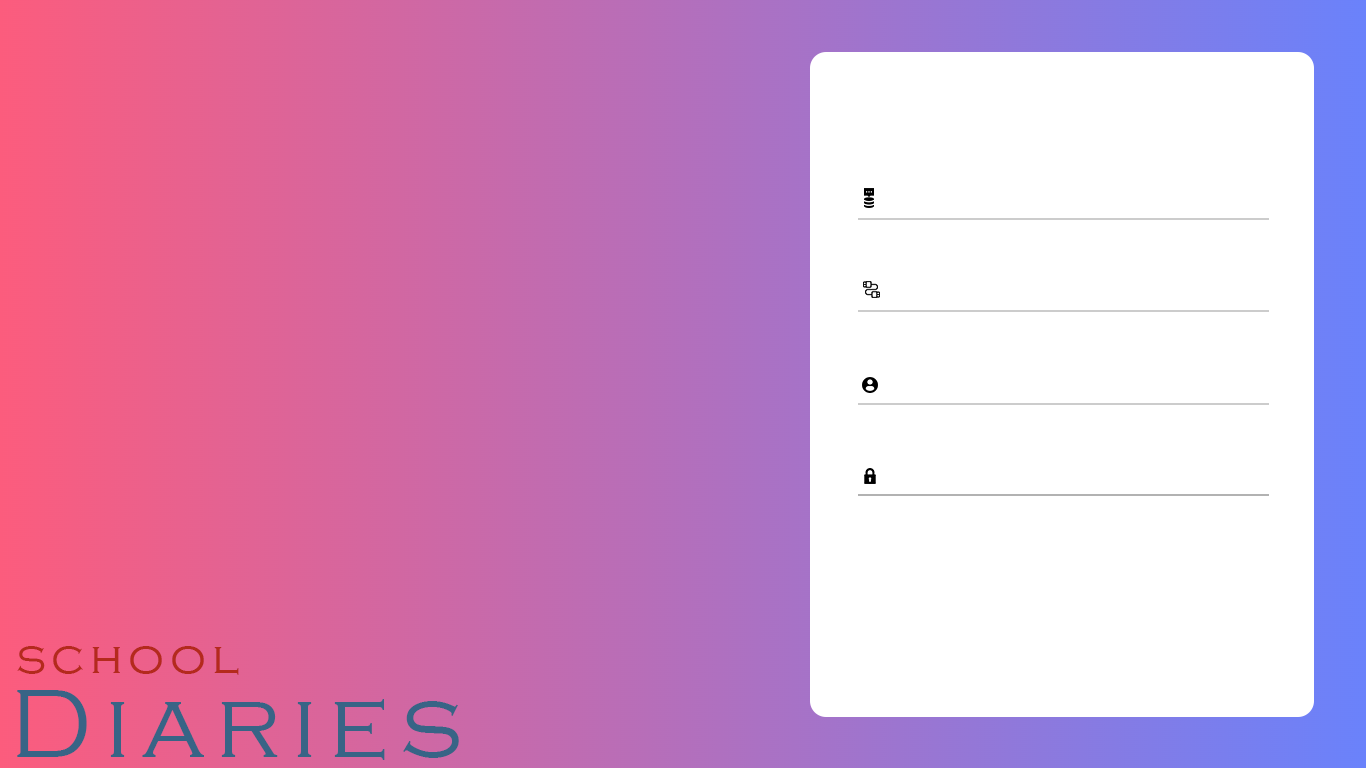
<style>
.page{position:relative;width:1366px;height:768px;background:#ffffff}
.page>*{position:absolute;margin:0}
.t1{font:48px "CopperplateGothic-Light";letter-spacing:0.12em;color:#b42a1d}
.t2{font:100px "CopperplateGothic-Light";letter-spacing:0.12em;color:#386486}
</style>
<div class="page">
<p class="t1" style="left:17px;top:646px;width:222px;height:29px">school</p>
<p class="t2" style="left:17px;top:690px;width:442px;height:70px">Diaries</p>
</div>
